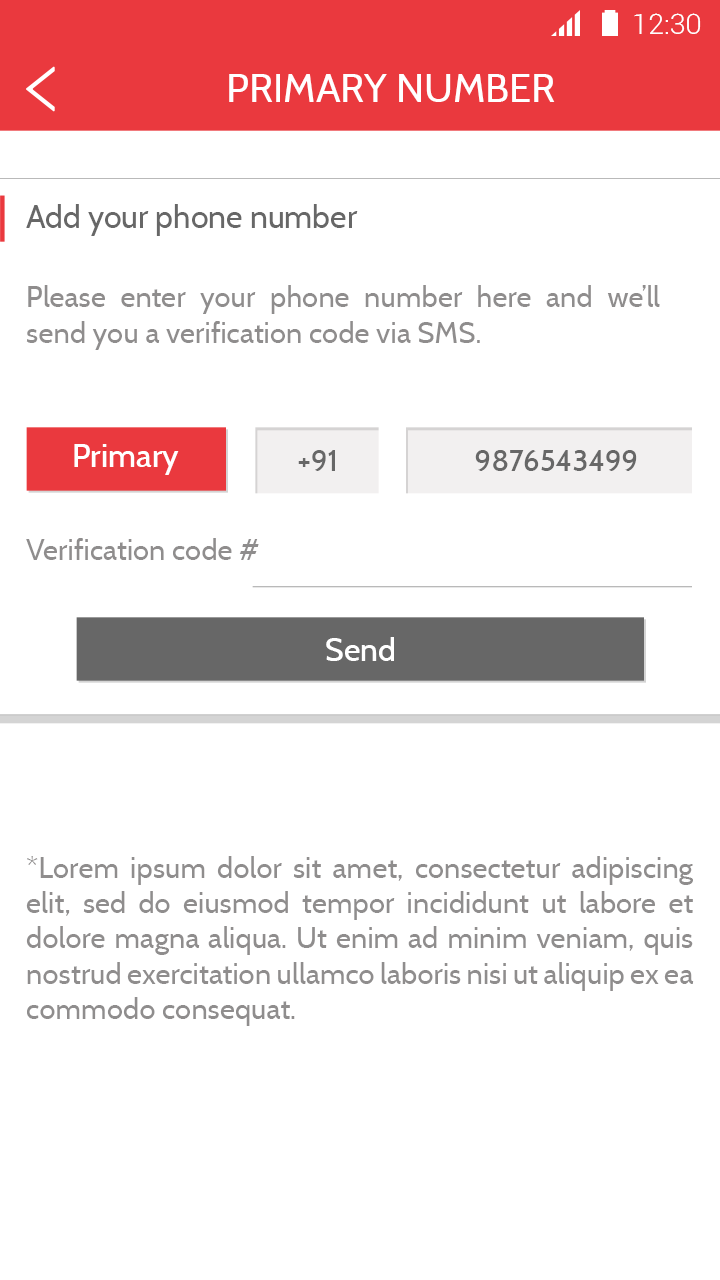
<style>
.page{position:relative;width:720px;height:1280px;background:#ffffff}
.page>*{position:absolute;margin:0}
.t1{font:28.4px "Roboto-Light";color:#ffffff}
.t2{font:40px "Cabin-Regular";color:#ffffff}
.t3{font:32px "Cabin-Regular";color:#676767}
.t4{font:29.3px "Cabin-Regular";color:#8f8d8d}
.t5{font:32px "Cabin-Medium";color:#ffffff}
.t6{font:29.3px "Cabin-Medium";color:#676767}
</style>
<div class="page">
<p class="t1" style="left:634px;top:13px;width:67px;height:21px">12:30</p>
<p class="t2" style="left:229px;top:74px;width:326px;height:28px">PRIMARY NUMBER</p>
<p class="t3" style="left:26px;top:204px;width:332px;height:32px">Add your phone number</p>
<p class="t4" style="left:26px;top:285px;width:634px;height:65px;text-align:justify">Please enter your phone number here and we’ll send you a verification code via SMS.</p>
<p class="t5" style="left:74px;top:444px;width:105px;height:31px">Primary</p>
<p class="t6" style="left:298px;top:450px;width:37px;height:21px">+91</p>
<p class="t6" style="left:475px;top:450px;width:162px;height:21px">9876543499</p>
<p class="t4" style="left:26px;top:538px;width:233px;height:22px">Verification code #</p>
<p class="t5" style="left:326px;top:637px;width:68px;height:24px">Send</p>
<p class="t4" style="left:26px;top:856px;width:668px;height:170px;text-align:justify">*Lorem ipsum dolor sit amet, consectetur adipiscing elit, sed do eiusmod tempor incididunt ut labore et dolore magna aliqua. Ut enim ad minim veniam, quis nostrud exercitation ullamco laboris nisi ut aliquip ex ea commodo consequat.</p>
</div>
